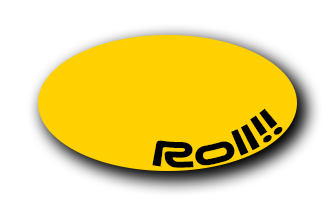
<style>
.page{position:relative;width:334px;height:204px;background:#ffffff}
.page>*{position:absolute;margin:0}
.t1{font:44.1px "NicoKaku";letter-spacing:-0.04em;color:#000000}
.t2{font:44.1px "NicoKaku";letter-spacing:-0.2em;color:#000000}
</style>
<div class="page">
<p class="t1" style="left:152px;top:108px;width:131px;height:60px;rotate:-15deg">Roll<span class="t2">!!</span></p>
</div>
